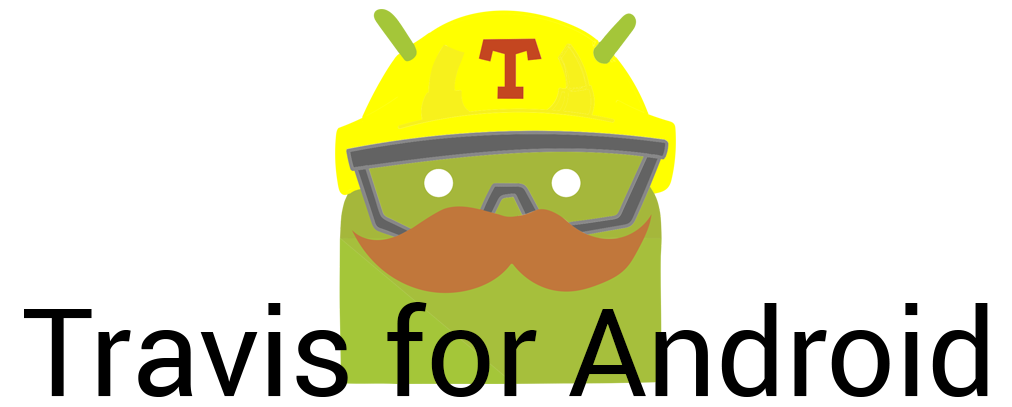
<style>
.page{position:relative;width:1012px;height:407px;background:#ffffff}
.page>*{position:absolute;margin:0}
.t1{font:122.1px "Roboto-Regular";color:#000000}
</style>
<div class="page">
<p class="t1" style="left:24px;top:302px;width:964px;height:95px">Travis for Android</p>
</div>
